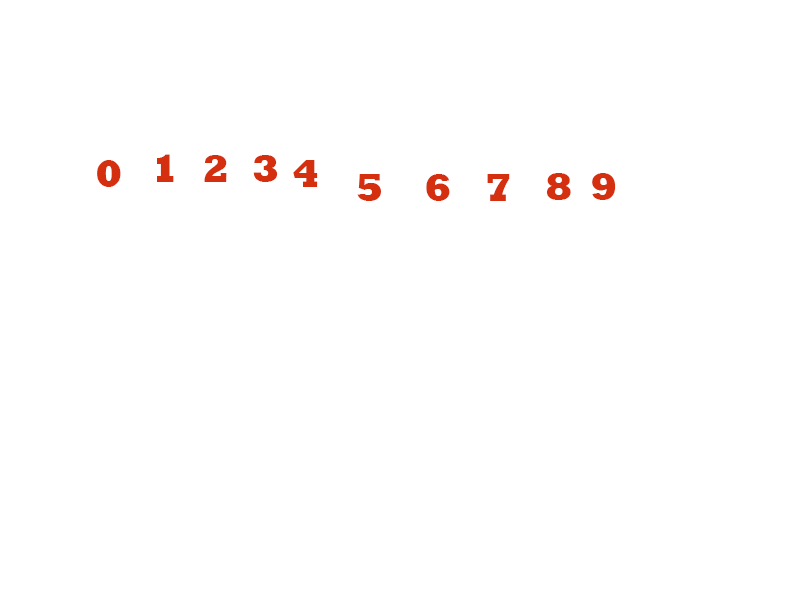
<style>
.page{position:relative;width:800px;height:600px;background:#ffffff}
.page>*{position:absolute;margin:0}
.t1{font:40px "Rockwell-ExtraBold";color:#d42f0e}
</style>
<div class="page">
<p class="t1" style="left:97px;top:160px;width:24px;height:27px">0</p>
<p class="t1" style="left:157px;top:154px;width:17px;height:28px">1</p>
<p class="t1" style="left:204px;top:155px;width:23px;height:27px">2</p>
<p class="t1" style="left:253px;top:155px;width:25px;height:27px">3</p>
<p class="t1" style="left:293px;top:160px;width:25px;height:27px">4</p>
<p class="t1" style="left:357px;top:174px;width:24px;height:27px">5</p>
<p class="t1" style="left:426px;top:174px;width:24px;height:27px">6</p>
<p class="t1" style="left:487px;top:174px;width:23px;height:27px">7</p>
<p class="t1" style="left:546px;top:173px;width:25px;height:27px">8</p>
<p class="t1" style="left:592px;top:173px;width:24px;height:27px">9</p>
</div>
